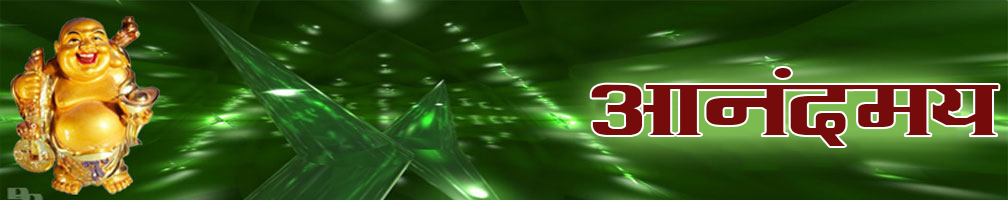
<style>
.page{position:relative;width:1008px;height:200px}
.page>*{position:absolute;margin:0}
.t1{font:90.4px "KrutiDev090Wide";color:#750b0b;scale:1.22 1}
</style>
<div class="page">
<p class="t1" style="left:591px;top:68px;width:408px;height:78px">vkuane;</p>
</div>
